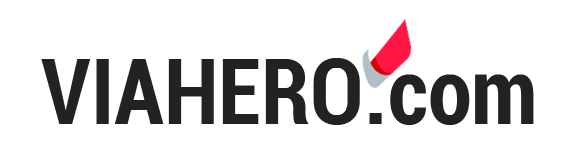
<style>
.page{position:relative;width:576px;height:161px;background:#ffffff}
.page>*{position:absolute;margin:0}
.t1{font:91.7px "Roboto-BoldCondensed";color:#222222}
</style>
<div class="page">
<p class="t1" style="left:41px;top:58px;width:493px;height:67px">VIAHERO.com</p>
</div>
